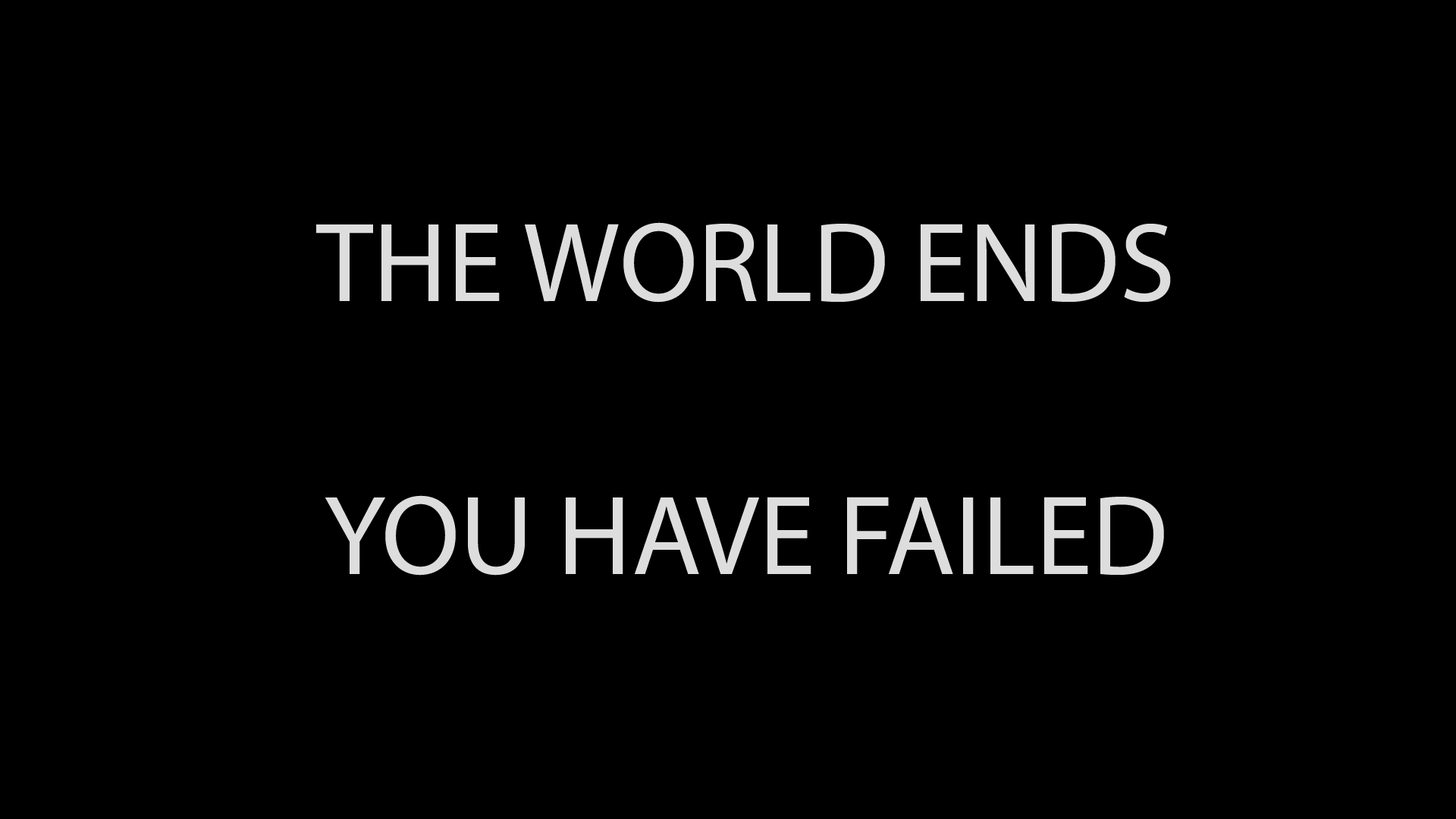
<style>
.page{position:relative;width:1456px;height:819px;background:#000000}
.page>*{position:absolute;margin:0}
.t1{font:113.7px "MyriadPro-Regular";color:#dddddd}
</style>
<div class="page">
<p class="t1" style="left:316px;top:222px;width:855px;height:354px;text-align:center">THE WORLD ENDS<br><br>YOU HAVE FAILED</p>
</div>
